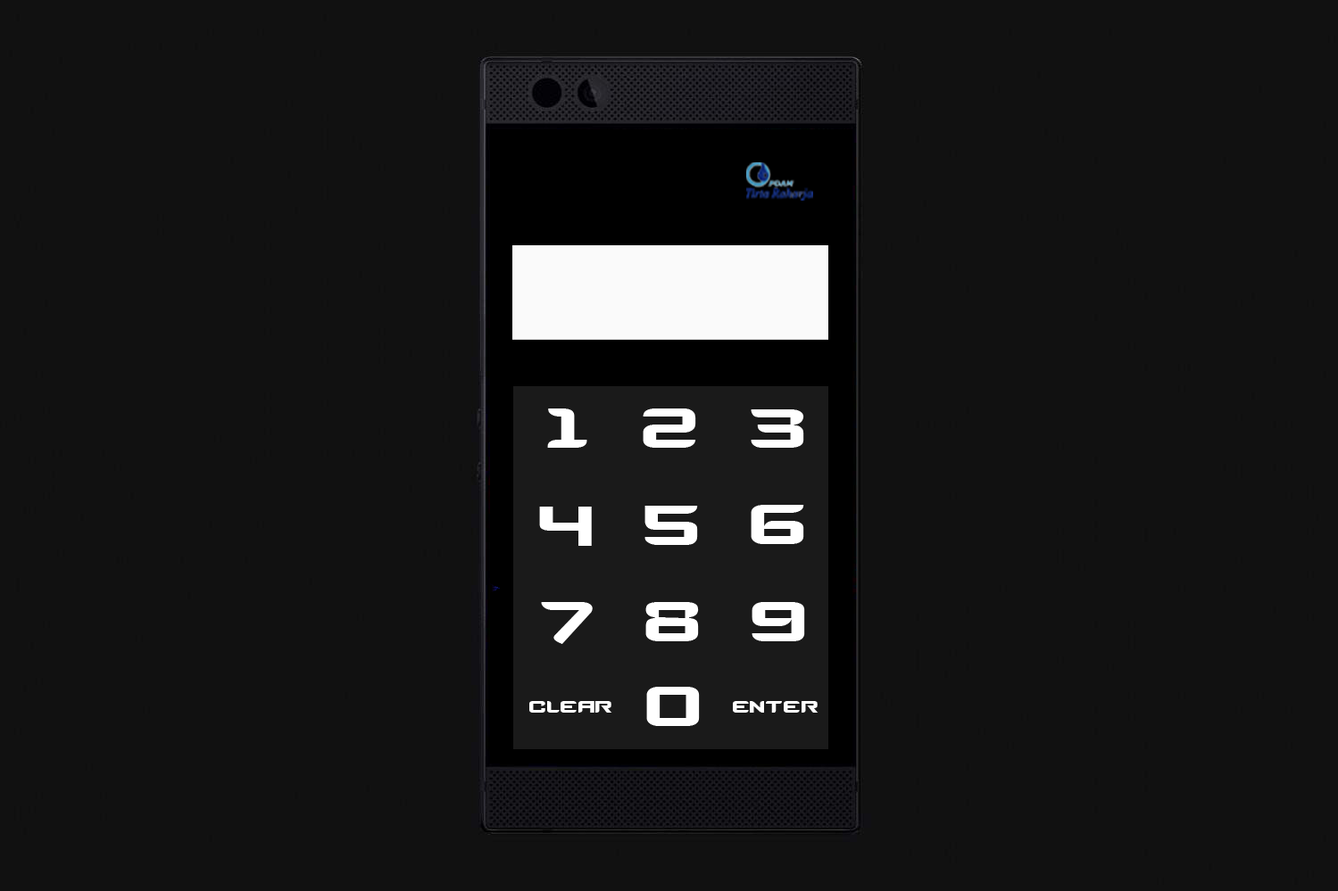
<style>
.page{position:relative;width:1338px;height:891px;background:#111111}
.page>*{position:absolute;margin:0}
.t1{font:77.3px "Counter-StrikeRegular";color:#ffffff}
.t2{font:30.9px "Counter-StrikeRegular";color:#ffffff}
</style>
<div class="page">
<p class="t1" style="left:547px;top:409px;width:40px;height:39px">1</p>
<p class="t1" style="left:642px;top:409px;width:54px;height:39px">2</p>
<p class="t1" style="left:750px;top:410px;width:54px;height:38px">3</p>
<p class="t1" style="left:539px;top:507px;width:53px;height:39px">4</p>
<p class="t1" style="left:644px;top:506px;width:54px;height:39px">5</p>
<p class="t1" style="left:750px;top:505px;width:54px;height:39px">6</p>
<p class="t1" style="left:541px;top:602px;width:52px;height:42px">7</p>
<p class="t1" style="left:645px;top:602px;width:54px;height:40px">8</p>
<p class="t1" style="left:751px;top:602px;width:54px;height:40px">9</p>
<p class="t1" style="left:646px;top:687px;width:54px;height:39px">0</p>
<p class="t2" style="left:529px;top:701px;width:83px;height:12px">clear</p>
<p class="t2" style="left:733px;top:701px;width:85px;height:12px">enter</p>
</div>
